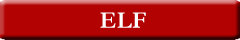
<style>
.page{position:relative;width:240px;height:40px;background:#b20202}
.page>*{position:absolute;margin:0}
.t1{font:24px "Garamond-Bold";color:#ffffff}
</style>
<div class="page">
<p class="t1" style="left:100px;top:12px;width:46px;height:16px">ELF</p>
</div>
